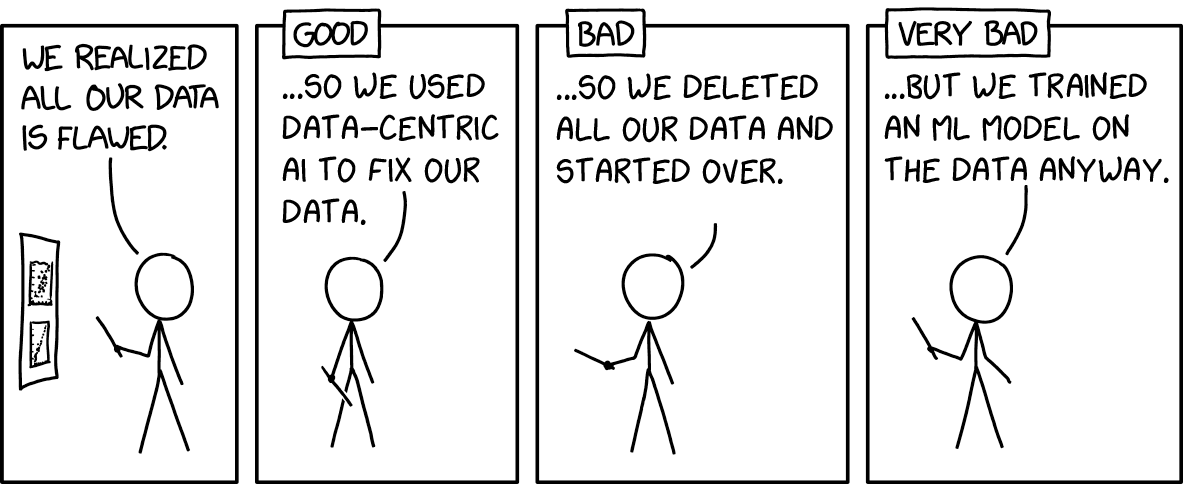
<style>
.page{position:relative;width:1183px;height:484px;background:#ffffff}
.page>*{position:absolute;margin:0}
.t1{font:35px "xkcdScript";color:#000000}
</style>
<div class="page">
<p class="t1" style="left:282px;top:72px;width:217px;height:153px">...SO WE USED<br>DATA-CENTRIC<br>AI TO FIX OUR<br>DATA.</p>
<p class="t1" style="left:556px;top:73px;width:277px;height:111px">...SO WE DELETED<br>ALL OUR DATA AND<br>STARTED OVER.</p>
<p class="t1" style="left:884px;top:72px;width:285px;height:111px">...BUT WE TRAINED<br>AN ML MODEL ON<br>THE DATA ANYWAY.</p>
</div>
